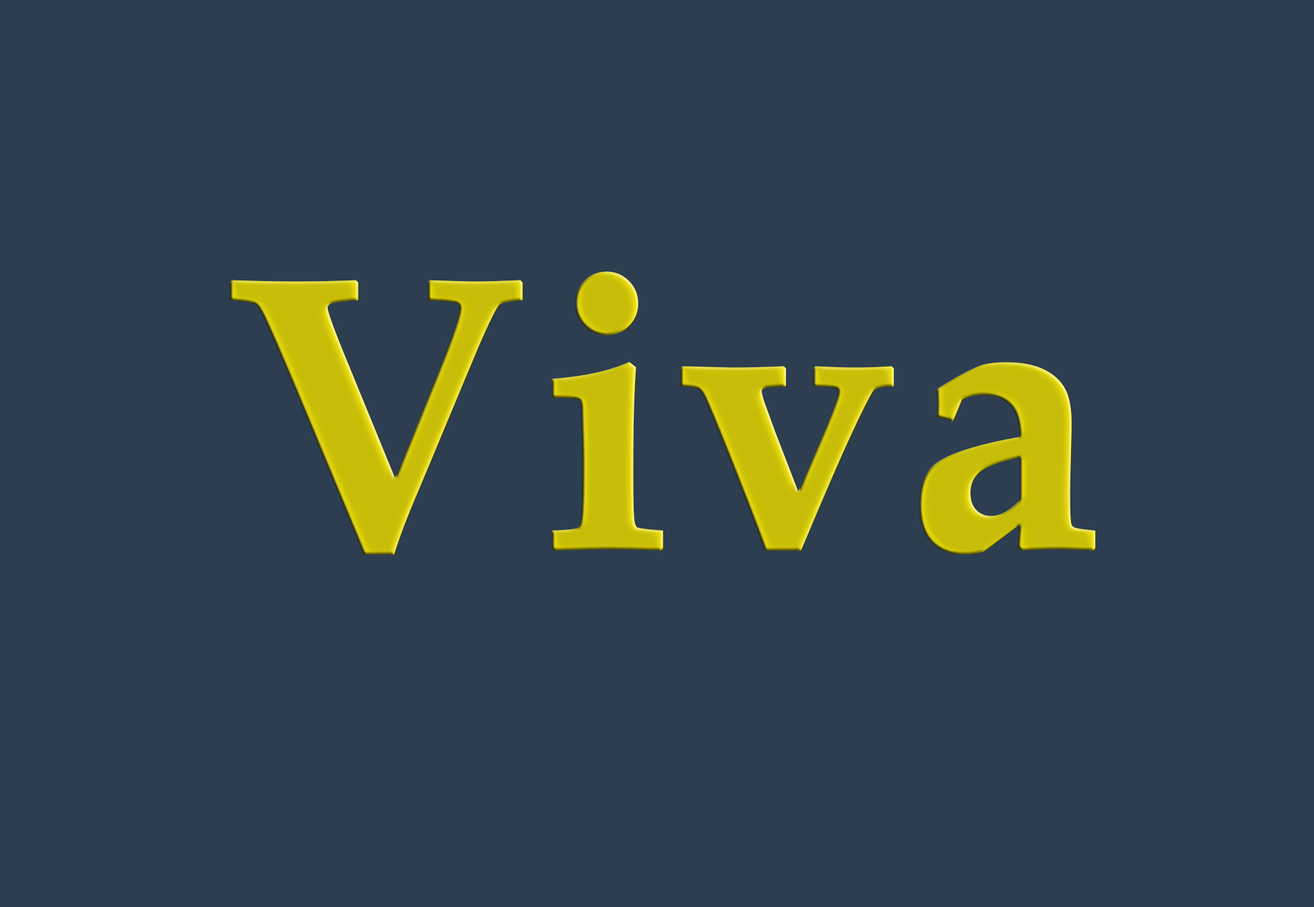
<style>
.page{position:relative;width:1314px;height:907px;background:#2c3e50}
.page>*{position:absolute;margin:0}
.t1{font:388.5px "BookAntiqua-Bold";color:#c7bd08;font-weight:bold}
</style>
<div class="page">
<p class="t1" style="left:229px;top:271px;width:867px;height:284px">Viva</p>
</div>
